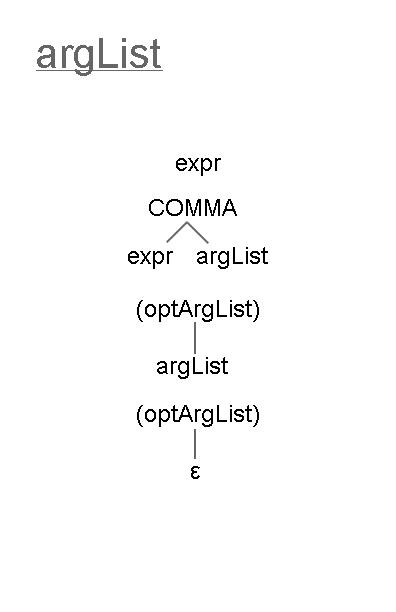
<style>
.page{position:relative;width:396px;height:612px;background:#ffffff}
.page>*{position:absolute;margin:0}
.t1{font:42px "ArialMT";color:#666666}
.t2{font:12px "ArialMT";color:#000000}
</style>
<div class="page">
<p class="t1" style="left:37px;top:38px;width:124px;height:38px">argList</p>
<p class="t2" style="left:176px;top:158px;width:45px;height:18px">expr</p>
<p class="t2" style="left:149px;top:199px;width:88px;height:17px">COMMA</p>
<p class="t2" style="left:128px;top:251px;width:45px;height:18px">expr</p>
<p class="t2" style="left:197px;top:247px;width:71px;height:22px">argList</p>
<p class="t2" style="left:137px;top:300px;width:122px;height:22px">(optArgList)</p>
<p class="t2" style="left:157px;top:357px;width:71px;height:22px">argList</p>
<p class="t2" style="left:137px;top:405px;width:122px;height:22px">(optArgList)</p>
<p class="t2" style="left:191px;top:466px;width:9px;height:13px">ε</p>
</div>
